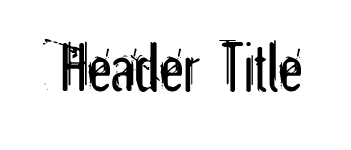
<style>
.page{position:relative;width:351px;height:150px;background:#ffffff}
.page>*{position:absolute;margin:0}
.t1{font:75px "Astonished";color:#000000}
</style>
<div class="page">
<p class="t1" style="left:43px;top:39px;width:258px;height:55px">Header Title</p>
</div>
